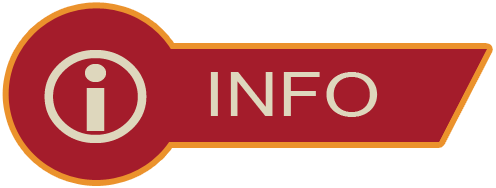
<style>
.page{position:relative;width:496px;height:188px;background:#a41c2b}
.page>*{position:absolute;margin:0}
.t1{font:66.8px "Shruti";color:#ded7bd;scale:1.19 1}
</style>
<div class="page">
<p class="t1" style="left:210px;top:72px;width:168px;height:45px">INFO</p>
</div>
